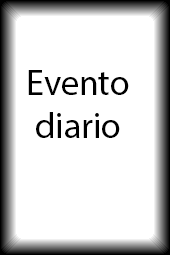
<style>
.page{position:relative;width:170px;height:255px;background:#ffffff}
.page>*{position:absolute;margin:0}
.t1{font:36px "MyriadPro-Regular";color:#000000}
</style>
<div class="page">
<p class="t1" style="left:28px;top:70px;width:101px;height:68px;text-align:center">Evento<br>diario</p>
</div>
